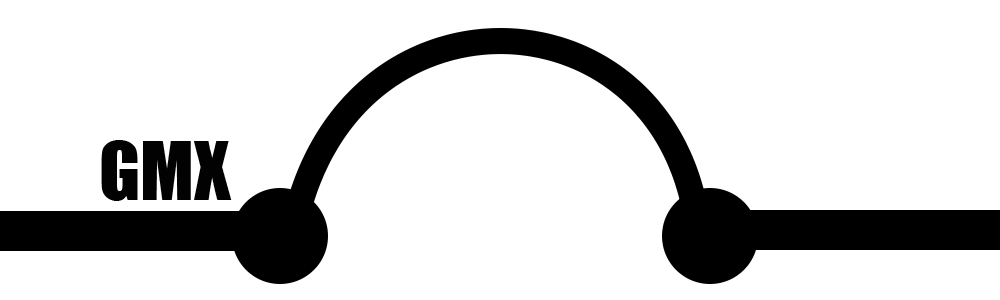
<style>
.page{position:relative;width:1000px;height:300px;background:#ffffff}
.page>*{position:absolute;margin:0}
.t1{font:75px "Impact";color:#020202}
</style>
<div class="page">
<p class="t1" style="left:101px;top:140px;width:131px;height:61px">GMX</p>
</div>
